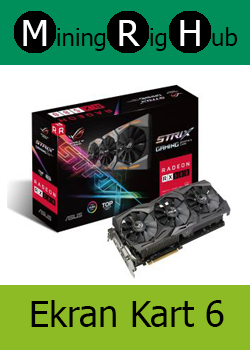
<style>
.page{position:relative;width:250px;height:350px;background:#ffffff}
.page>*{position:absolute;margin:0}
.t1{font:36px "Tahoma";color:#ffffff}
.t2{font:24px "Tahoma";color:#000000}
.t3{font:36px "Tahoma";color:#000000}
</style>
<div class="page">
<p class="t1" style="left:23px;top:20px;width:24px;height:26px">M</p>
<p class="t2" style="left:57px;top:28px;width:49px;height:23px">ining</p>
<p class="t1" style="left:119px;top:20px;width:21px;height:26px">R</p>
<p class="t2" style="left:150px;top:28px;width:17px;height:23px">ig</p>
<p class="t1" style="left:180px;top:20px;width:20px;height:26px">H</p>
<p class="t2" style="left:212px;top:27px;width:26px;height:19px">ub</p>
<p class="t3" style="left:31px;top:300px;width:193px;height:27px">Ekran Kart 6</p>
</div>
